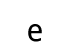
<style>
.page{position:relative;width:70px;height:55px;background:#ffffff}
.page>*{position:absolute;margin:0}
.t1{font:31.8px "DroidSans";color:#000000}
</style>
<div class="page">
<p class="t1" style="left:28px;top:24px;width:14px;height:18px">e</p>
</div>
